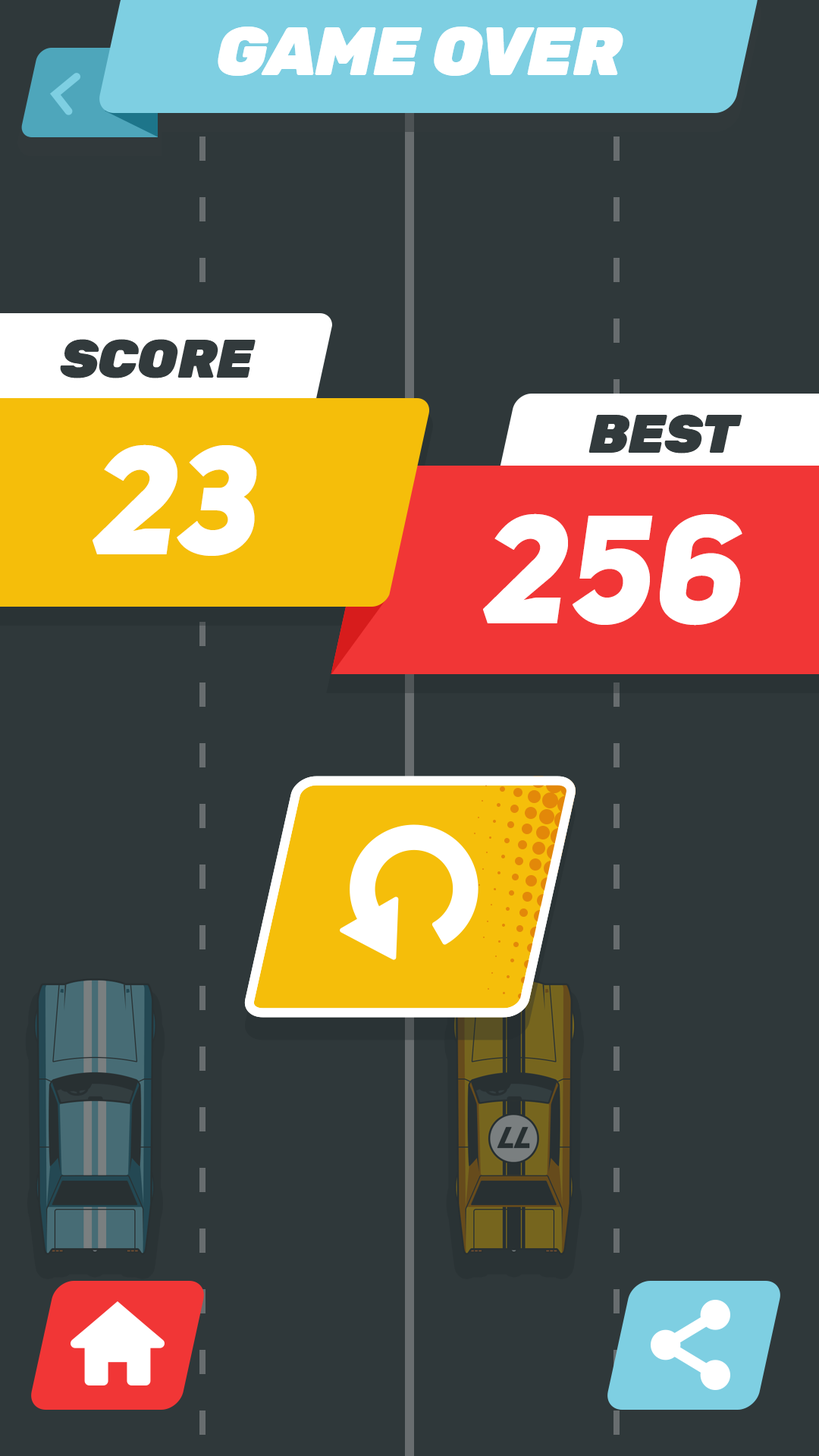
<style>
.page{position:relative;width:819px;height:1456px;background:#2f383a}
.page>*{position:absolute;margin:0}
.t1{font:68.2px "Rubik-BlackItalic";color:#ffffff;text-transform:uppercase}
.t2{font:54.6px "Rubik-BlackItalic";color:#323a3c;text-transform:uppercase}
.t3{font:151.7px "UniSansHeavyItalicCAPS";letter-spacing:0.025em;color:#ffffff}
</style>
<div class="page">
<p class="t1" style="left:218px;top:27px;width:405px;height:49px">game over</p>
<p class="t2" style="left:60px;top:339px;width:196px;height:39px">score</p>
<p class="t2" style="left:588px;top:414px;width:154px;height:39px">best</p>
<p class="t3" style="left:93px;top:444px;width:164px;height:112px">23</p>
<p class="t3" style="left:483px;top:513px;width:259px;height:113px">256</p>
</div>
